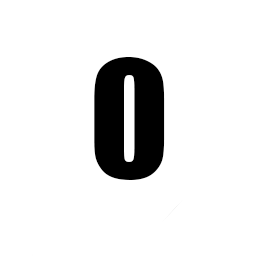
<style>
.page{position:relative;width:256px;height:256px;background:#ffffff}
.page>*{position:absolute;margin:0}
.t1{font:150px "Impact";color:#000000}
</style>
<div class="page">
<p class="t1" style="left:94px;top:57px;width:71px;height:123px">0</p>
</div>
